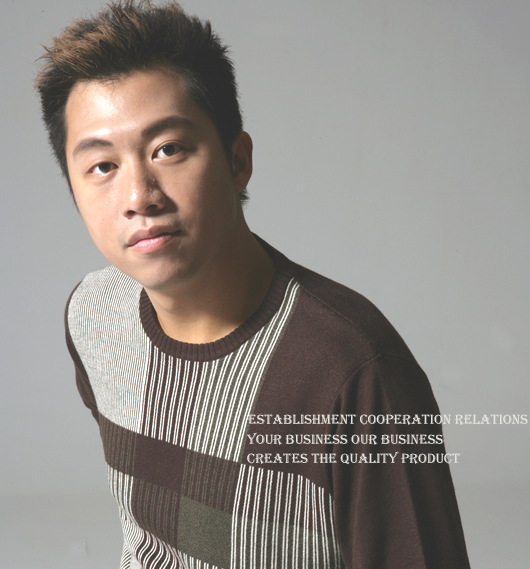
<style>
.page{position:relative;width:530px;height:569px}
.page>*{position:absolute;margin:0}
.t1{font:14px "Algerian";color:#e5e3de}
</style>
<div class="page">
<p class="t1" style="left:248px;top:414px;width:280px;height:11px">Establishment Cooperation Relations</p>
<p class="t1" style="left:246px;top:432px;width:198px;height:13px">Your Business Our Business</p>
<p class="t1" style="left:247px;top:451px;width:214px;height:14px">Creates the Quality Product</p>
</div>
